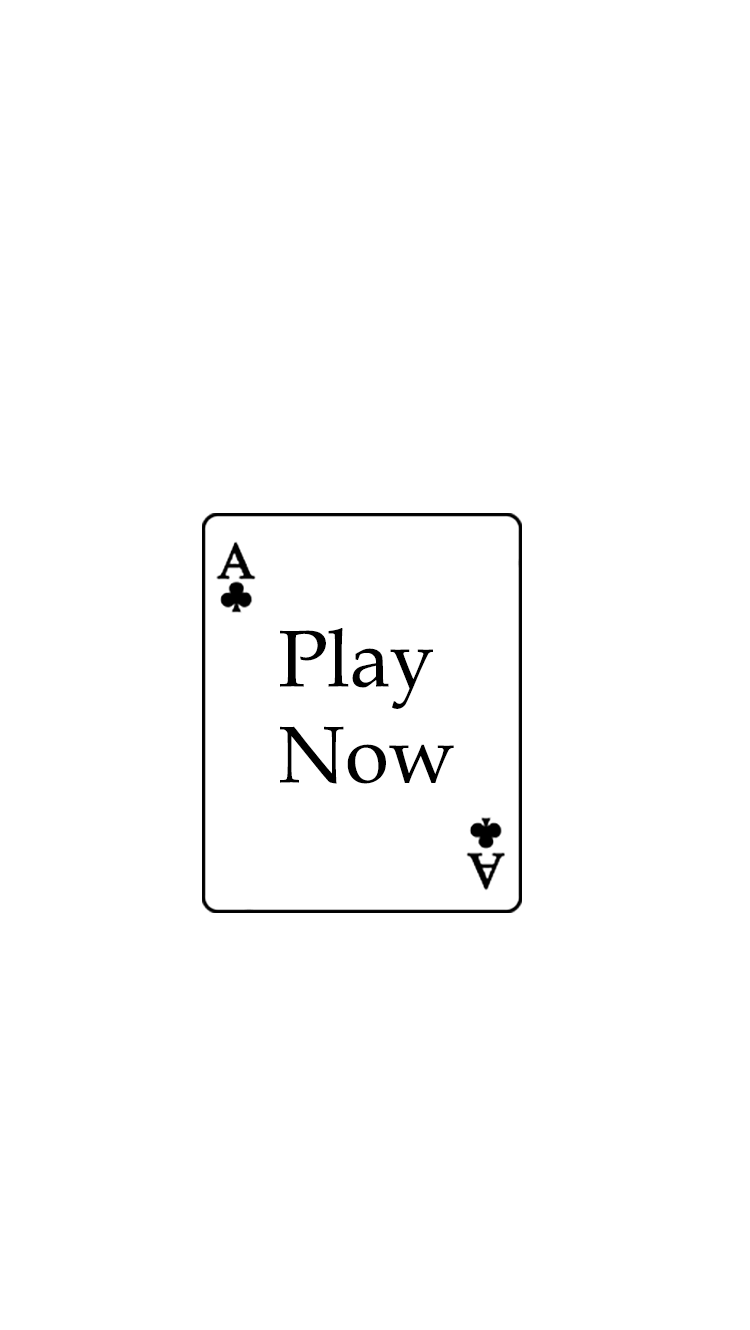
<style>
.page{position:relative;width:750px;height:1330px;background:#ffffff}
.page>*{position:absolute;margin:0}
.t1{font:80px "BookAntiqua";color:#000000}
</style>
<div class="page">
<p class="t1" style="left:280px;top:628px;width:174px;height:156px">Play Now</p>
</div>
